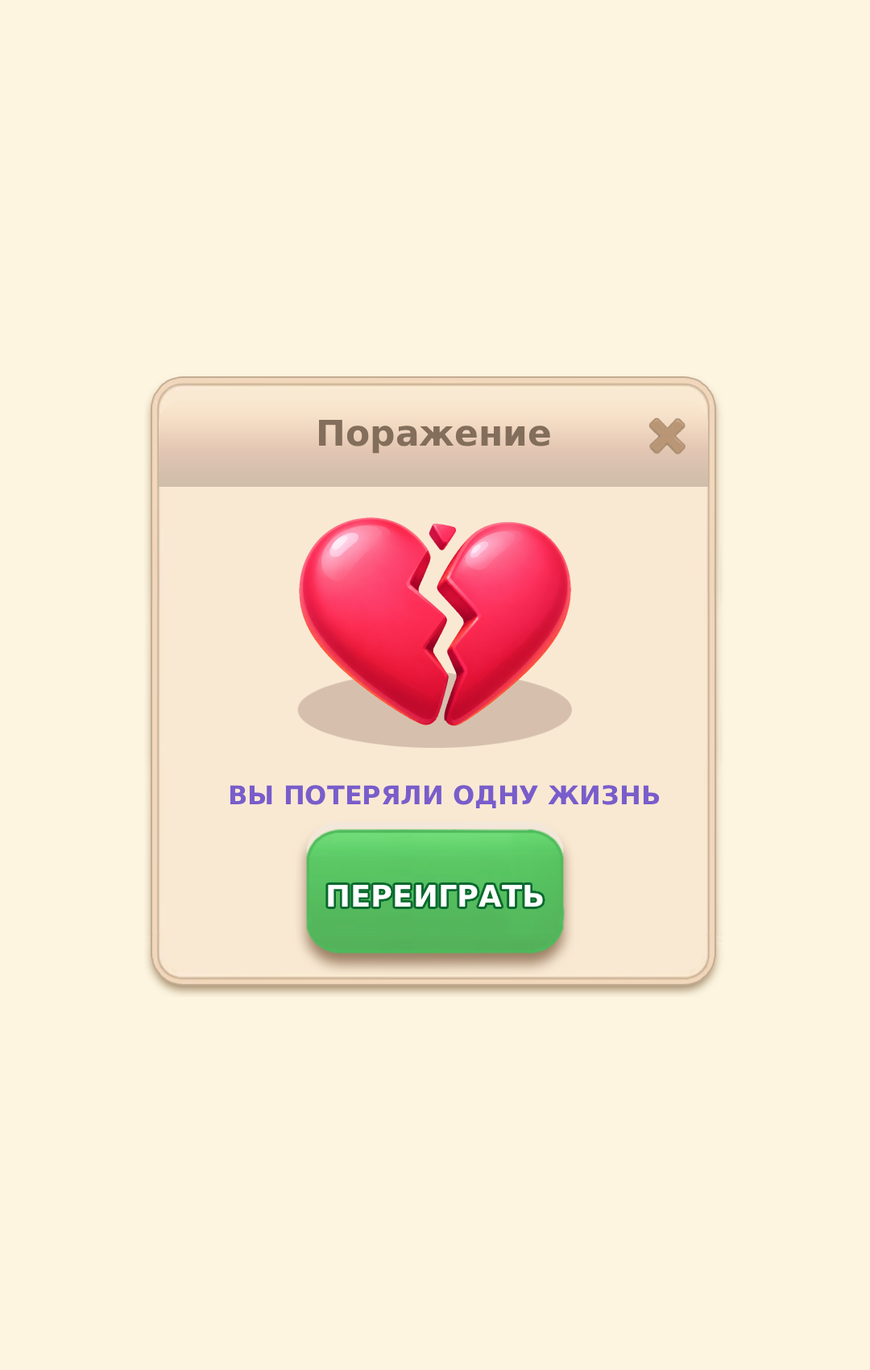
<style>
.page{position:relative;width:870px;height:1370px;background:#fdf5e0}
.page>*{position:absolute;margin:0}
.t1{font:35.5px "DejaVuSans-Bold";color:#826e5a}
.t2{font:25.8px "DejaVuSans-Bold";color:#795dcb}
.t3{font:29.8px "DejaVuSans-Bold";color:#ffffff}
</style>
<div class="page">
<p class="t1" style="left:319px;top:419px;width:231px;height:35px">Поражение</p>
<p class="t2" style="left:230px;top:785px;width:430px;height:24px">ВЫ ПОТЕРЯЛИ ОДНУ ЖИЗНЬ</p>
<p class="t3" style="left:328px;top:885px;width:215px;height:22px">ПЕРЕИГРАТЬ</p>
</div>
